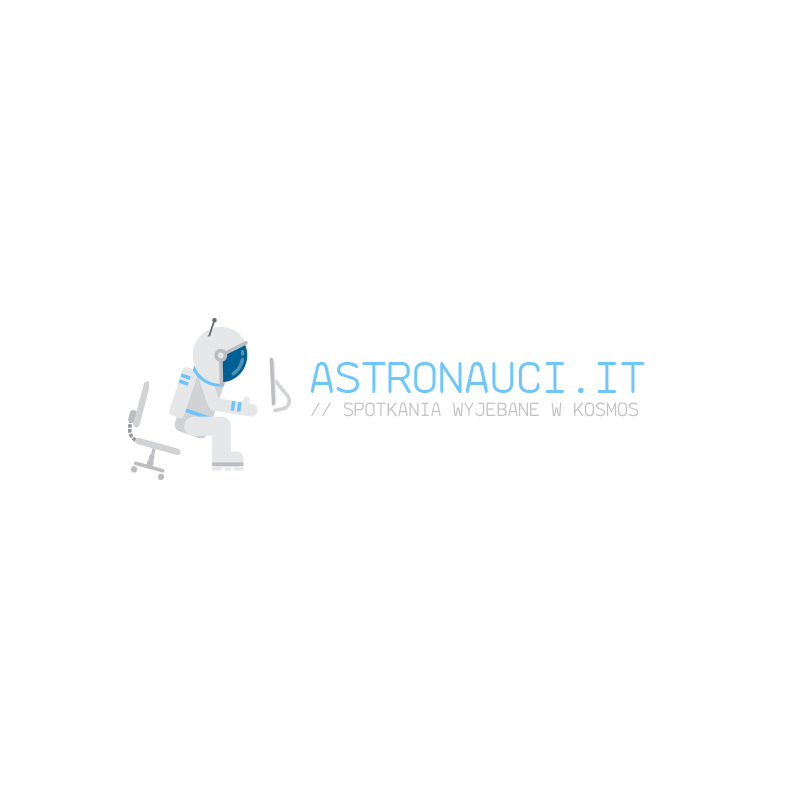
<style>
.page{position:relative;width:800px;height:800px;background:#ffffff}
.page>*{position:absolute;margin:0}
.t1{font:47.3px "saxMono";color:#6dc6ff}
.t2{font:20px "saxMono";color:#c4c4c4;text-transform:uppercase}
</style>
<div class="page">
<p class="t1" style="left:310px;top:362px;width:335px;height:31px">ASTRONAUCI.IT</p>
<p class="t2" style="left:311px;top:402px;width:328px;height:15px">// SPOTKANIA wyjebanE w kosmos</p>
</div>
